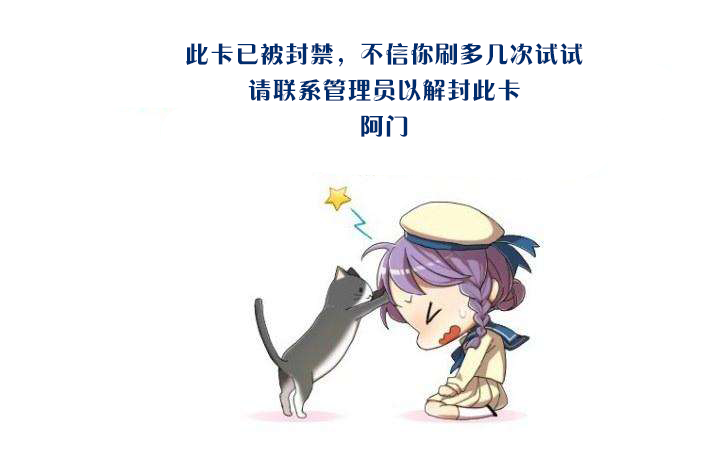
<style>
.page{position:relative;width:720px;height:458px;background:#ffffff}
.page>*{position:absolute;margin:0}
.t1{font:25px "FZCHYJW--GB1-0";color:#002c6d}
</style>
<div class="page">
<p class="t1" style="left:186px;top:43px;width:397px;height:94px;text-align:center">此卡已被封禁，不信你刷多几次试试<br>请联系管理员以解封此卡<br>阿门</p>
</div>
